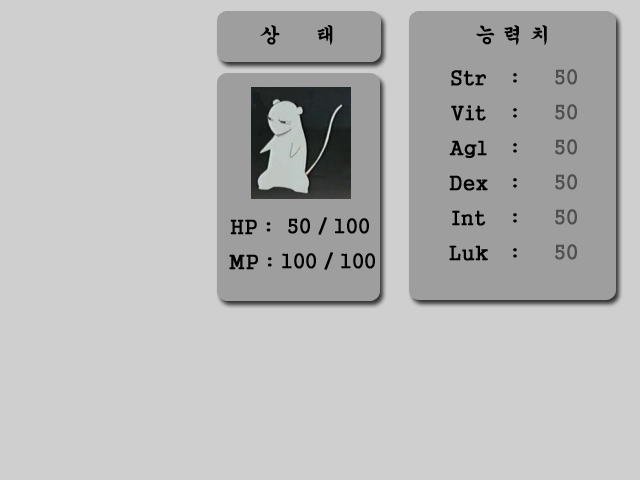
<style>
.page{position:relative;width:640px;height:480px;background:#cfcfcf}
.page>*{position:absolute;margin:0}
.t1{font:20px "Gungsuh";color:#000000;font-weight:bold}
.t2{font:20px "Gungsuh";color:#4f4f4f;font-weight:bold}
</style>
<div class="page">
<p class="t1" style="left:260px;top:25px;width:73px;height:20px">상     태</p>
<p class="t1" style="left:476px;top:25px;width:71px;height:20px">능 력 치</p>
<p class="t1" style="left:449px;top:70px;width:39px;height:191px;text-align:center">Str<br>Vit<br>Agl<br>Dex<br>Int<br>Luk</p>
<p class="t1" style="left:513px;top:73px;width:4px;height:185px;text-align:center">:<br>:<br>:<br>:<br>:<br>:</p>
<p class="t2" style="left:555px;top:69px;width:22px;height:191px;text-align:center">50<br>50<br>50<br>50<br>50<br>50</p>
<p class="t1" style="left:229px;top:219px;width:43px;height:51px;text-align:center">HP :<br>MP :</p>
<p class="t1" style="left:282px;top:217px;width:93px;height:53px;text-align:center">50 / 100<br>100 / 100</p>
</div>
